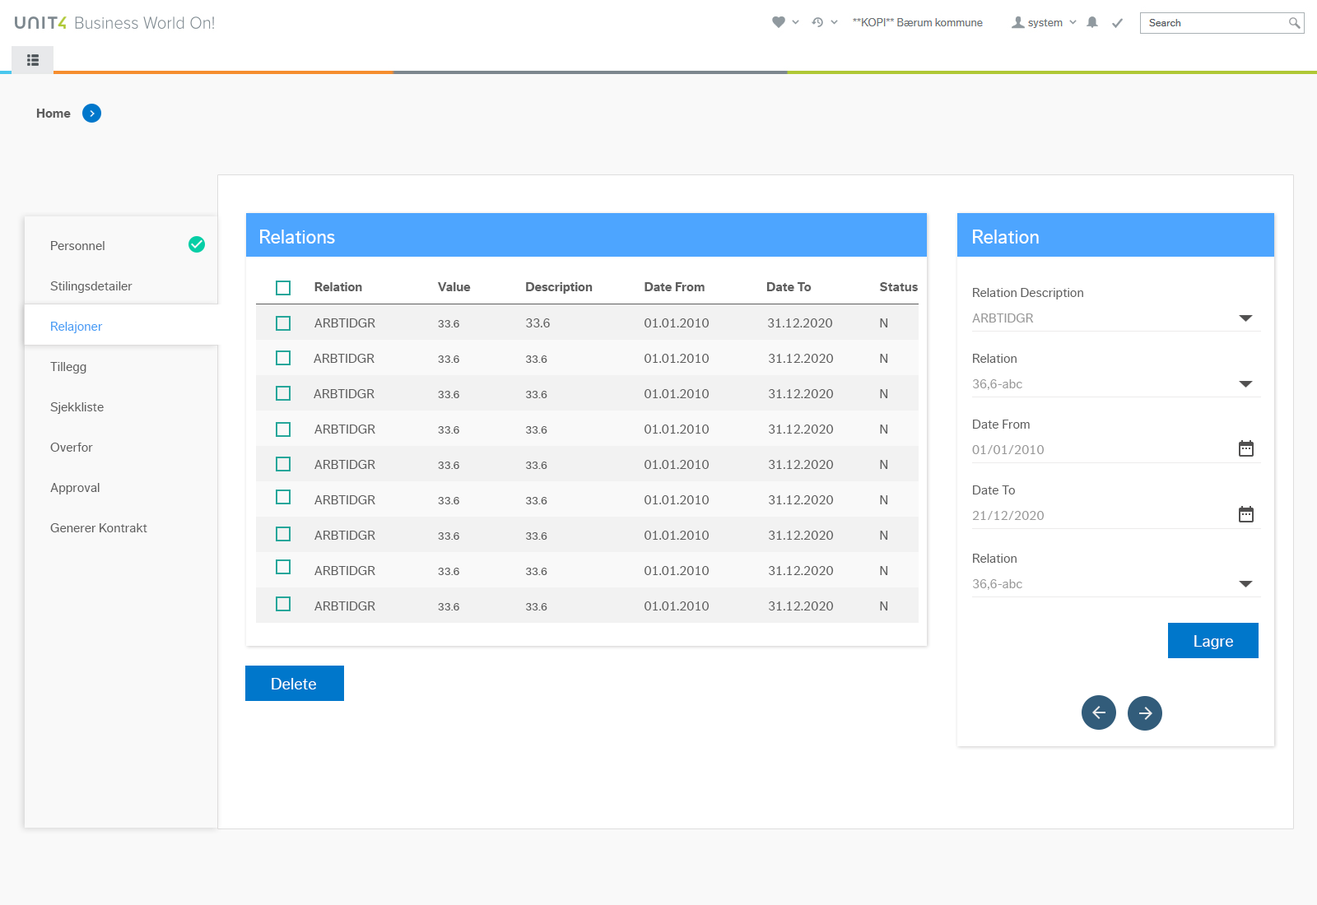
<style>
.page{position:relative;width:1317px;height:905px;background:#ffffff}
.page>*{position:absolute;margin:0}
.t1{font:13.2px "DagnyCompPro-Bold";color:#5e5e5e}
.t2{font:19.8px "DagnyCompPro";color:#ffffff}
.t3{font:13.2px/40.3px "DagnyCompPro";color:#5e5e5e}
.t4{font:13.2px/40.3px "DagnyCompPro";color:#449cf5}
.t5{font:13.2px "DagnyCompPro";color:#5e5e5e}
.t6{font:13.2px "DagnyCompPro";color:#989898}
.t7{font:11.5px "DagnyCompPro";color:#5e5e5e}
.t8{font:16.5px "DagnyCompPro";color:#ffffff}
</style>
<div class="page">
<p class="t1" style="left:36px;top:109px;width:35px;height:9px">Home</p>
<p class="t2" style="left:260px;top:230px;width:75px;height:14px">Relations</p>
<p class="t2" style="left:973px;top:230px;width:66px;height:14px">Relation</p>
<p class="t3" style="left:50px;top:241px;width:97px;height:292px">Personnel<br>Stilingsdetailer<br><span class="t4">Relajoner<br></span>Tillegg  <br>Sjekkliste<br>Overfor<br>Approval<br>Generer Kontrakt</p>
<p class="t1" style="left:314px;top:282px;width:48px;height:9px">Relation</p>
<p class="t1" style="left:437px;top:282px;width:34px;height:9px">Value</p>
<p class="t1" style="left:526px;top:282px;width:67px;height:12px">Description</p>
<p class="t1" style="left:644px;top:282px;width:61px;height:9px">Date From</p>
<p class="t1" style="left:766px;top:282px;width:46px;height:9px">Date To</p>
<p class="t1" style="left:879px;top:282px;width:39px;height:9px">Status</p>
<p class="t5" style="left:973px;top:288px;width:110px;height:12px">Relation Description</p>
<p class="t6" style="left:972px;top:314px;width:62px;height:9px">ARBTIDGR</p>
<p class="t5" style="left:314px;top:319px;width:61px;height:9px">ARBTIDGR</p>
<p class="t7" style="left:438px;top:320px;width:21px;height:8px">33.6</p>
<p class="t5" style="left:526px;top:319px;width:24px;height:9px">33.6</p>
<p class="t5" style="left:644px;top:319px;width:66px;height:9px">01.01.2010</p>
<p class="t5" style="left:768px;top:319px;width:65px;height:9px">31.12.2020</p>
<p class="t5" style="left:880px;top:319px;width:8px;height:9px">N</p>
<p class="t5" style="left:314px;top:354px;width:61px;height:9px">ARBTIDGR</p>
<p class="t5" style="left:644px;top:354px;width:66px;height:9px">01.01.2010</p>
<p class="t5" style="left:769px;top:354px;width:65px;height:9px">31.12.2020</p>
<p class="t5" style="left:880px;top:354px;width:8px;height:9px">N</p>
<p class="t5" style="left:973px;top:354px;width:44px;height:9px">Relation</p>
<p class="t7" style="left:438px;top:356px;width:21px;height:7px">33.6</p>
<p class="t7" style="left:526px;top:356px;width:21px;height:7px">33.6</p>
<p class="t5" style="left:314px;top:389px;width:61px;height:9px">ARBTIDGR</p>
<p class="t5" style="left:644px;top:389px;width:66px;height:9px">01.01.2010</p>
<p class="t5" style="left:769px;top:389px;width:65px;height:9px">31.12.2020</p>
<p class="t5" style="left:880px;top:389px;width:8px;height:9px">N</p>
<p class="t6" style="left:973px;top:379px;width:49px;height:11px">36,6-abc</p>
<p class="t7" style="left:438px;top:391px;width:21px;height:7px">33.6</p>
<p class="t7" style="left:526px;top:391px;width:21px;height:7px">33.6</p>
<p class="t5" style="left:314px;top:425px;width:61px;height:9px">ARBTIDGR</p>
<p class="t5" style="left:644px;top:425px;width:66px;height:9px">01.01.2010</p>
<p class="t5" style="left:769px;top:425px;width:65px;height:9px">31.12.2020</p>
<p class="t5" style="left:880px;top:425px;width:8px;height:9px">N</p>
<p class="t5" style="left:973px;top:420px;width:57px;height:9px">Date From</p>
<p class="t7" style="left:438px;top:426px;width:21px;height:8px">33.6</p>
<p class="t7" style="left:526px;top:426px;width:21px;height:8px">33.6</p>
<p class="t6" style="left:972px;top:445px;width:73px;height:9px">01/01/2010</p>
<p class="t5" style="left:314px;top:460px;width:61px;height:9px">ARBTIDGR</p>
<p class="t7" style="left:438px;top:462px;width:21px;height:7px">33.6</p>
<p class="t7" style="left:526px;top:462px;width:21px;height:7px">33.6</p>
<p class="t5" style="left:644px;top:460px;width:66px;height:9px">01.01.2010</p>
<p class="t5" style="left:769px;top:460px;width:65px;height:9px">31.12.2020</p>
<p class="t5" style="left:880px;top:460px;width:8px;height:9px">N</p>
<p class="t5" style="left:973px;top:486px;width:42px;height:9px">Date To</p>
<p class="t5" style="left:314px;top:496px;width:61px;height:9px">ARBTIDGR</p>
<p class="t7" style="left:438px;top:497px;width:21px;height:8px">33.6</p>
<p class="t7" style="left:526px;top:497px;width:21px;height:8px">33.6</p>
<p class="t5" style="left:644px;top:496px;width:66px;height:9px">01.01.2010</p>
<p class="t5" style="left:769px;top:496px;width:65px;height:9px">31.12.2020</p>
<p class="t5" style="left:880px;top:496px;width:8px;height:9px">N</p>
<p class="t6" style="left:972px;top:511px;width:73px;height:9px">21/12/2020</p>
<p class="t5" style="left:314px;top:531px;width:61px;height:9px">ARBTIDGR</p>
<p class="t7" style="left:438px;top:533px;width:21px;height:7px">33.6</p>
<p class="t7" style="left:526px;top:533px;width:21px;height:7px">33.6</p>
<p class="t5" style="left:644px;top:531px;width:66px;height:9px">01.01.2010</p>
<p class="t5" style="left:769px;top:531px;width:65px;height:9px">31.12.2020</p>
<p class="t5" style="left:880px;top:531px;width:8px;height:9px">N</p>
<p class="t5" style="left:973px;top:554px;width:44px;height:9px">Relation</p>
<p class="t5" style="left:314px;top:566px;width:61px;height:9px">ARBTIDGR</p>
<p class="t7" style="left:438px;top:568px;width:21px;height:7px">33.6</p>
<p class="t7" style="left:526px;top:568px;width:21px;height:7px">33.6</p>
<p class="t5" style="left:644px;top:566px;width:66px;height:9px">01.01.2010</p>
<p class="t5" style="left:769px;top:566px;width:65px;height:9px">31.12.2020</p>
<p class="t5" style="left:880px;top:566px;width:8px;height:9px">N</p>
<p class="t6" style="left:973px;top:579px;width:49px;height:11px">36,6-abc</p>
<p class="t5" style="left:314px;top:602px;width:61px;height:9px">ARBTIDGR</p>
<p class="t7" style="left:438px;top:603px;width:21px;height:8px">33.6</p>
<p class="t7" style="left:526px;top:603px;width:21px;height:8px">33.6</p>
<p class="t5" style="left:644px;top:602px;width:66px;height:9px">01.01.2010</p>
<p class="t5" style="left:769px;top:602px;width:65px;height:9px">31.12.2020</p>
<p class="t5" style="left:880px;top:602px;width:8px;height:9px">N</p>
<p class="t8" style="left:1194px;top:635px;width:39px;height:14px">Lagre</p>
<p class="t8" style="left:272px;top:678px;width:44px;height:12px">Delete</p>
</div>
